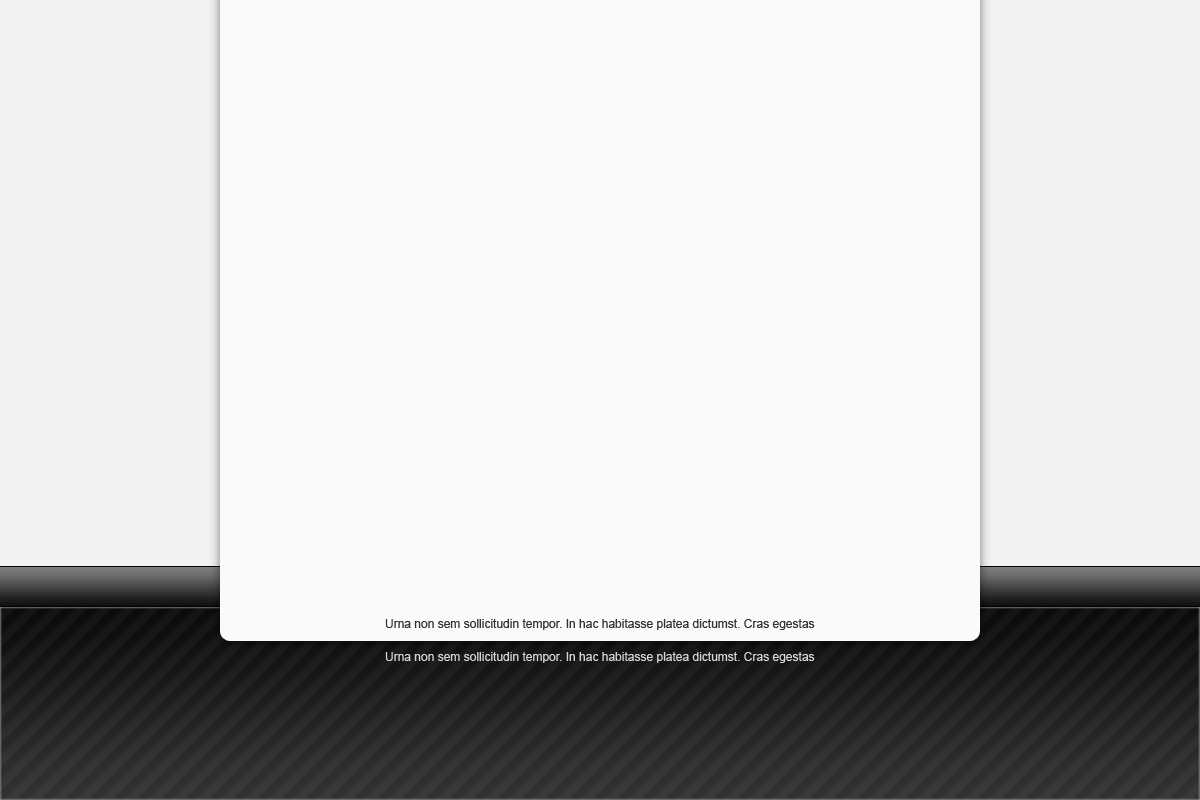
<style>
.page{position:relative;width:1200px;height:800px;background:#fcf9f9}
.page>*{position:absolute;margin:0}
.t1{font:12px "ArialMT";color:#323232}
.t2{font:12px "ArialMT";color:#d8d6d6}
</style>
<div class="page">
<p class="t1" style="left:385px;top:619px;width:430px;height:11px">Urna non sem sollicitudin tempor. In hac habitasse platea dictumst. Cras egestas</p>
<p class="t2" style="left:385px;top:652px;width:430px;height:11px">Urna non sem sollicitudin tempor. In hac habitasse platea dictumst. Cras egestas</p>
</div>
